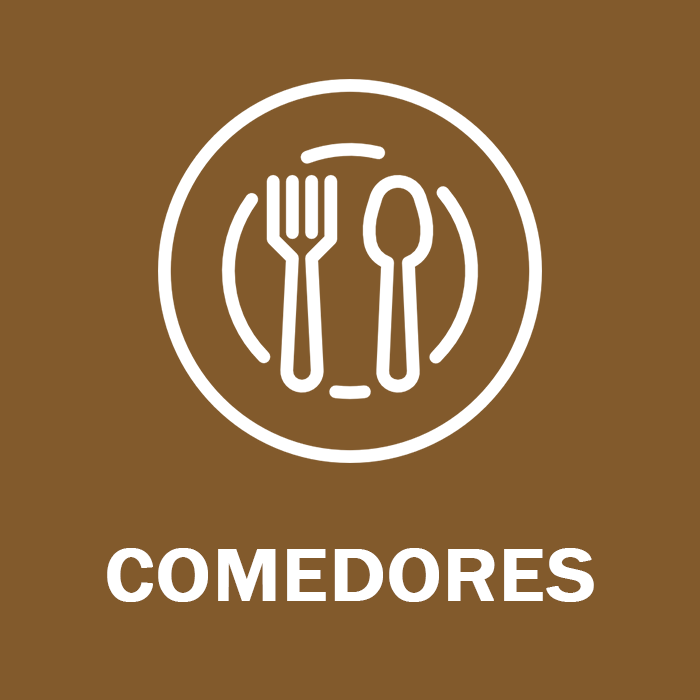
<style>
.page{position:relative;width:700px;height:700px;background:#825a2c}
.page>*{position:absolute;margin:0}
.t1{font:77px "FranklinGothic-Medium";color:#ffffff;font-weight:bold;scale:1.09 1}
</style>
<div class="page">
<p class="t1" style="left:107px;top:548px;width:487px;height:54px">COMEDORES</p>
</div>
